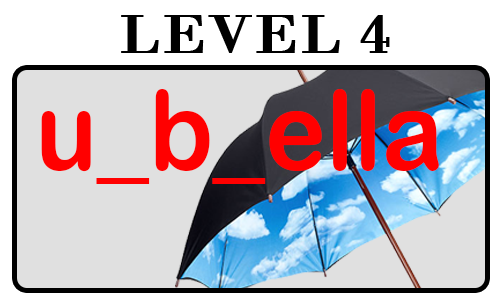
<style>
.page{position:relative;width:500px;height:300px;background:#e0e0e0}
.page>*{position:absolute;margin:0}
.t1{font:55.7px "BodoniMT";color:#000000;font-weight:bold;scale:1.14 1}
.t2{font:111.3px "ArialRoundedMTBold";color:#ff0000;scale:0.93 1}
</style>
<div class="page">
<p class="t1" style="left:121px;top:15px;width:269px;height:38px">LEVEL 4</p>
<p class="t2" style="left:41px;top:89px;width:398px;height:95px">u_b_ella</p>
</div>
